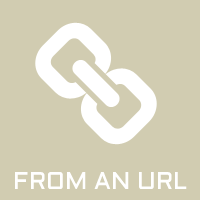
<style>
.page{position:relative;width:200px;height:200px;background:#d1ccb1}
.page>*{position:absolute;margin:0}
.t1{font:24px "Aldrich";color:#ffffff}
</style>
<div class="page">
<p class="t1" style="left:15px;top:172px;width:172px;height:17px">FROM AN URL</p>
</div>
